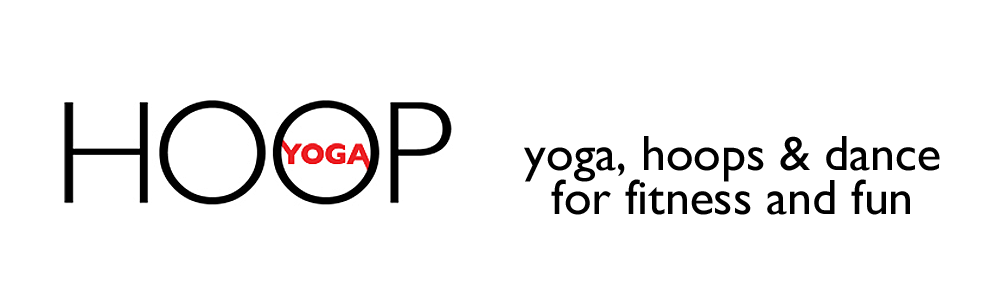
<style>
.page{position:relative;width:1000px;height:288px;background:#ffffff}
.page>*{position:absolute;margin:0}
.t1{font:49.8px/43.8px "GillSansMT";color:#000000}
</style>
<div class="page">
<p class="t1" style="left:524px;top:136px;width:416px;height:79px;text-align:right">yoga, hoops &amp; dance<br>for fitness and fun</p>
</div>
